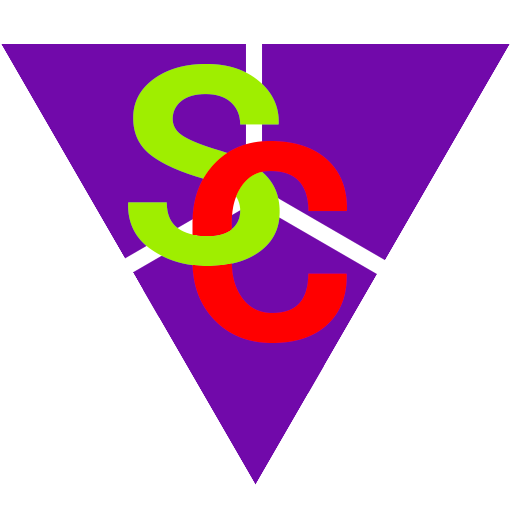
<style>
.page{position:relative;width:512px;height:512px;background:#ffffff}
.page>*{position:absolute;margin:0}
.t1{font:275.9px "Roboto-Bold";color:#9fee00}
.t2{font:275.9px "Roboto-Bold";color:#ff0000}
</style>
<div class="page">
<p class="t1" style="left:128px;top:64px;width:152px;height:202px">S</p>
<p class="t2" style="left:192px;top:141px;width:155px;height:202px">C</p>
</div>
